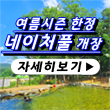
<style>
.page{position:relative;width:110px;height:110px}
.page>*{position:absolute;margin:0}
.t1{font:13.9px/20px "GyeonggiTitleV";color:#fefefe;font-style:italic;text-decoration:underline;scale:0.93 1}
.t2{font:18.7px/20px "GyeonggiTitleV";color:#fefefe;font-style:italic;text-decoration:underline;scale:0.93 1}
.t3{font:13.7px/20px "GyeonggiTitleV";color:#fefefe;font-style:italic;text-decoration:underline;scale:0.93 1}
.t4{font:13.1px "GyeonggiTitleV";color:#000000;font-style:italic;text-decoration:underline}
</style>
<div class="page">
<p class="t1" style="left:1px;top:17px;width:102px;height:36px;text-align:center">여름시즌 한정<br><span class="t2">네이처풀</span><span class="t3"> 개장</span></p>
<p class="t4" style="left:16px;top:60px;width:66px;height:15px">자세히보기</p>
</div>
